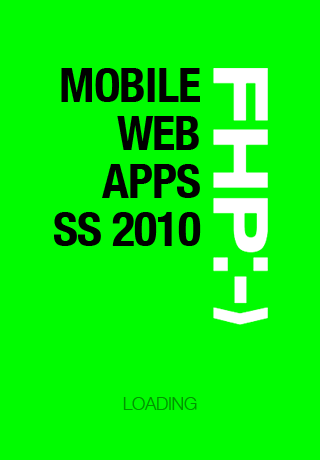
<style>
.page{position:relative;width:320px;height:460px;background:#00fc00}
.page>*{position:absolute;margin:0}
.t1{font:48px/48px "HelveticaNeue-CondensedBold";letter-spacing:-0.02em;color:#000000}
.t2{font:18px "HelveticaNeue-Light";letter-spacing:-0.02em;color:#009400}
</style>
<div class="page">
<p class="t1" style="left:54px;top:68px;width:147px;height:178px;text-align:right">MOBILE<br>WEB<br>APPS<br>SS 2010</p>
<p class="t2" style="left:123px;top:397px;width:74px;height:13px">LOADING</p>
</div>
